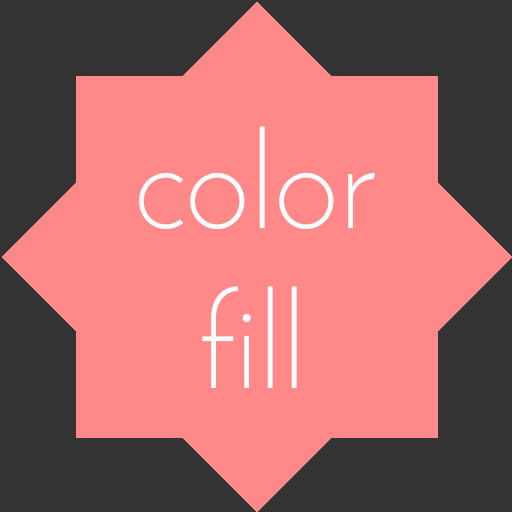
<style>
.page{position:relative;width:512px;height:512px;background:#ff8989}
.page>*{position:absolute;margin:0}
.t1{font:133.2px "JosefinSans-Light";color:#ffffff}
</style>
<div class="page">
<p class="t1" style="left:139px;top:126px;width:236px;height:262px;text-align:center">color<br>fill</p>
</div>
